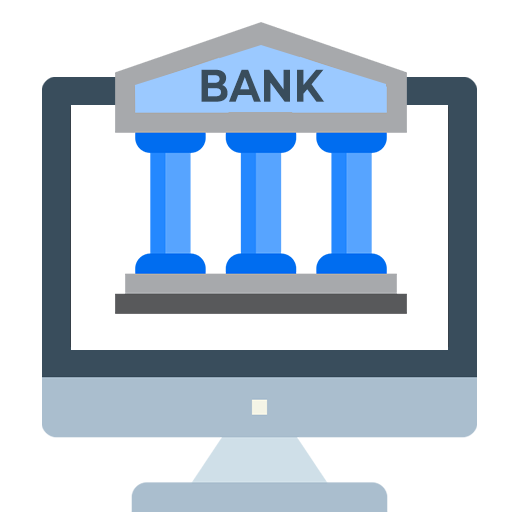
<style>
.page{position:relative;width:512px;height:512px;background:#ffffff}
.page>*{position:absolute;margin:0}
.t1{font:45.7px "Montserrat-Bold";color:#394d5c;scale:0.89 1}
</style>
<div class="page">
<p class="t1" style="left:201px;top:69px;width:124px;height:33px">BANK</p>
</div>
